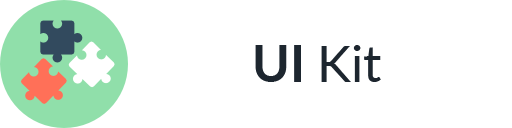
<style>
.page{position:relative;width:512px;height:128px;background:#ffffff}
.page>*{position:absolute;margin:0}
.t1{font:50.7px "Lato-Regular";color:#1d262f}
.t2{font:50.7px "Lato-Bold";color:#1d262f}
</style>
<div class="page">
<p class="t1" style="left:255px;top:45px;width:126px;height:37px"><span class="t2">UI </span>Kit</p>
</div>
